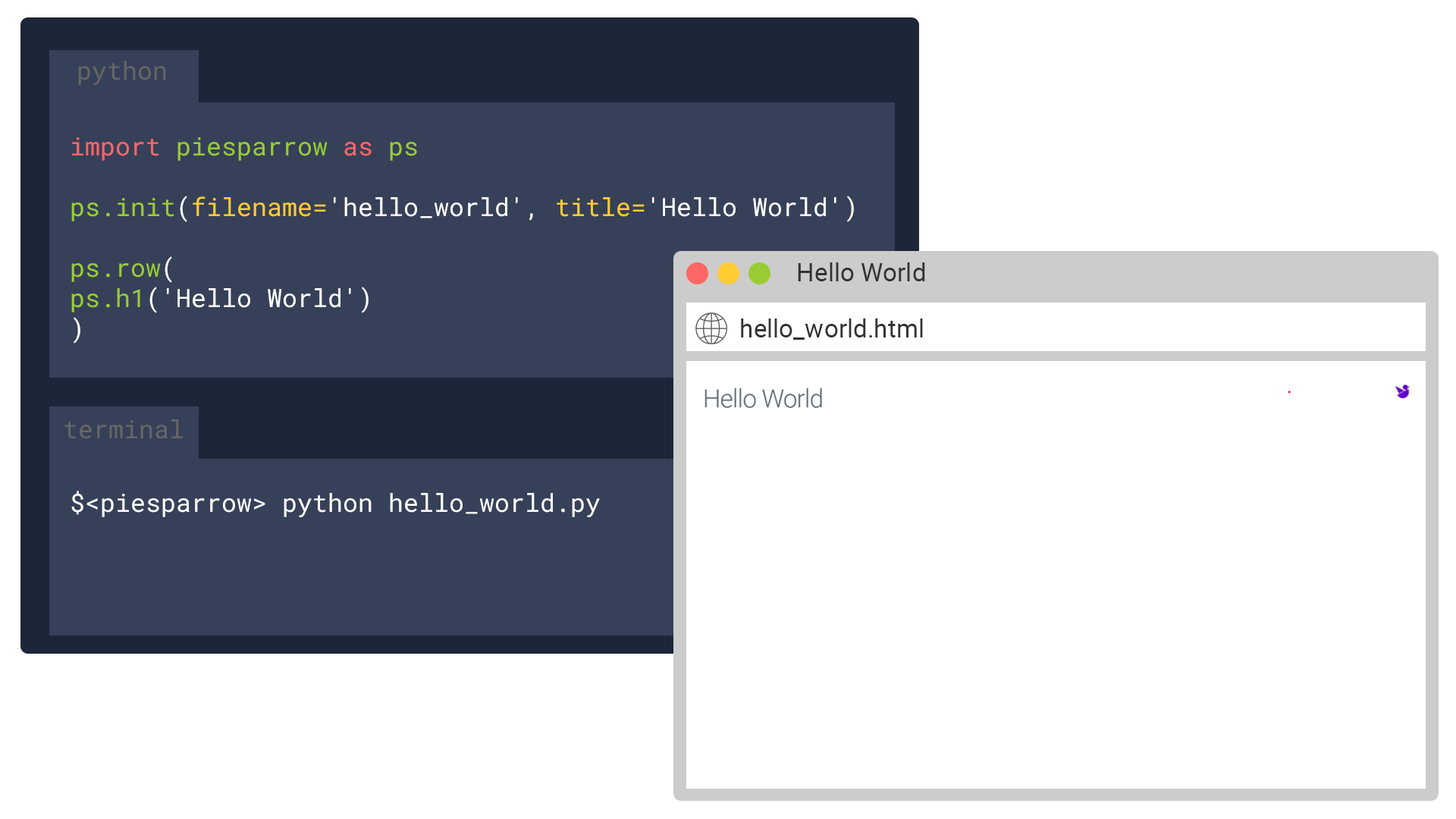
<style>
.page{position:relative;width:1456px;height:819px;background:#ffffff}
.page>*{position:absolute;margin:0}
.t1{font:25.3px "RobotoMono-Regular";color:#666666}
.t2{font:25.3px "RobotoMono-Regular";color:#ffffff}
.t3{font:25.3px "RobotoMono-Regular";color:#ff6666}
.t4{font:25.3px "RobotoMono-Regular";color:#99cc33}
.t5{font:25.3px "RobotoMono-Regular";color:#ffcc33}
.t6{font:25.3px "Roboto-Regular";color:#333333}
</style>
<div class="page">
<p class="t1" style="left:78px;top:61px;width:88px;height:24px">python</p>
<p class="t2" style="left:71px;top:137px;width:783px;height:207px"><span class="t3">import </span><span class="t4">piesparrow </span><span class="t3">as </span><span class="t4">ps<br><br>ps.init</span>(<span class="t5">filename=</span>'hello_world', <span class="t5">title=</span>'Hello World')<br><br><span class="t4">ps.row</span>(<br><span class="t4">ps.h1</span>('Hello World')<br>)</p>
<p class="t6" style="left:798px;top:262px;width:127px;height:19px">Hello World</p>
<p class="t6" style="left:741px;top:318px;width:182px;height:22px">hello_world.html</p>
<p class="t1" style="left:64px;top:419px;width:119px;height:20px">terminal</p>
<p class="t2" style="left:71px;top:491px;width:529px;height:26px">$&lt;piesparrow&gt; python hello_world.py</p>
</div>
